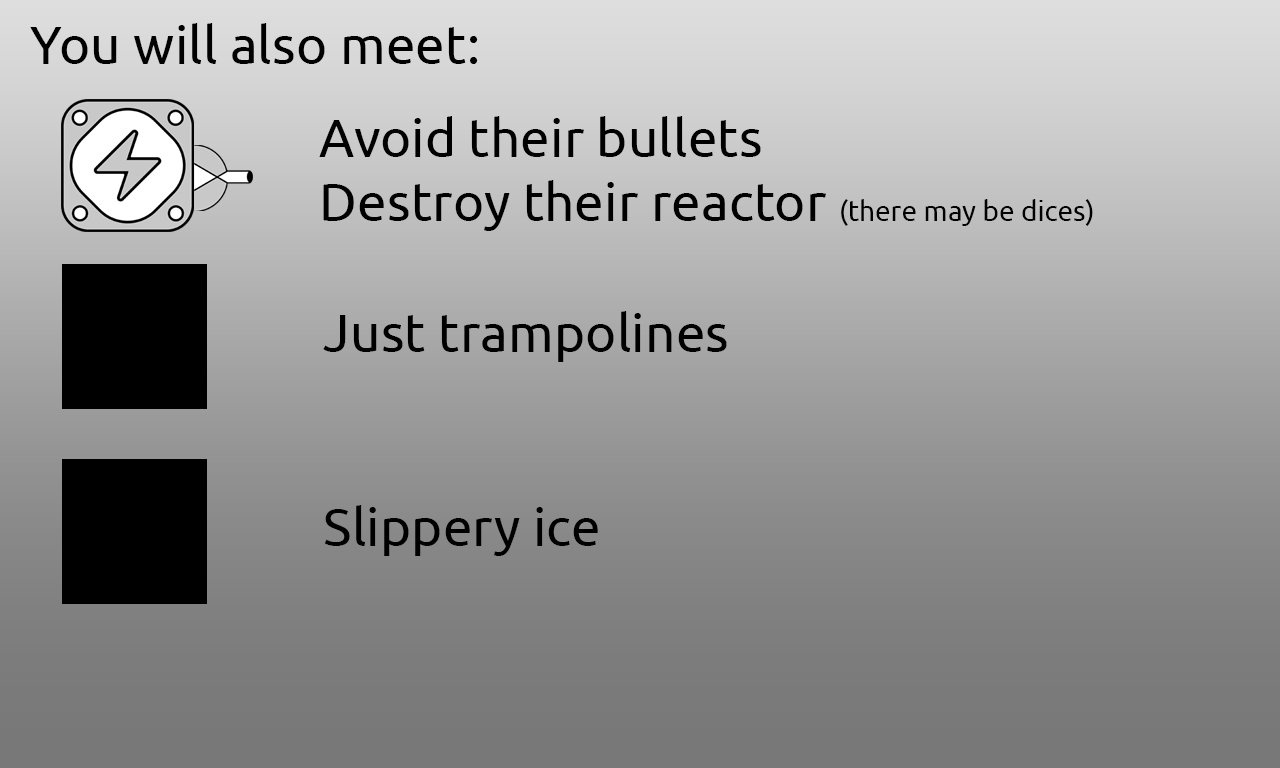
<style>
.page{position:relative;width:1280px;height:768px}
.page>*{position:absolute;margin:0}
.t1{font:53.3px "Ubuntu-Regular";color:#000000}
.t2{font:28px "Ubuntu-Regular";color:#000000}
</style>
<div class="page">
<p class="t1" style="left:30px;top:23px;width:448px;height:41px">You will also meet:</p>
<p class="t1" style="left:319px;top:116px;width:774px;height:115px">Avoid their bullets<br>Destroy their reactor <span class="t2">(there may be dices)</span></p>
<p class="t1" style="left:323px;top:311px;width:404px;height:51px">Just trampolines</p>
<p class="t1" style="left:324px;top:505px;width:274px;height:51px">Slippery ice</p>
</div>
